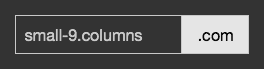
<style>
.page{position:relative;width:264px;height:69px;background:#333333}
.page>*{position:absolute;margin:0}
.t1{font:12px "MyriadPro-Regular";color:#c9c9c9}
.t2{font:12px "MyriadPro-Regular";color:#0a0a0a}
</style>
<div class="page">
<p class="t1" style="left:25px;top:29px;width:118px;height:13px">small-9.columns</p>
<p class="t2" style="left:198px;top:32px;width:35px;height:10px">.com</p>
</div>
